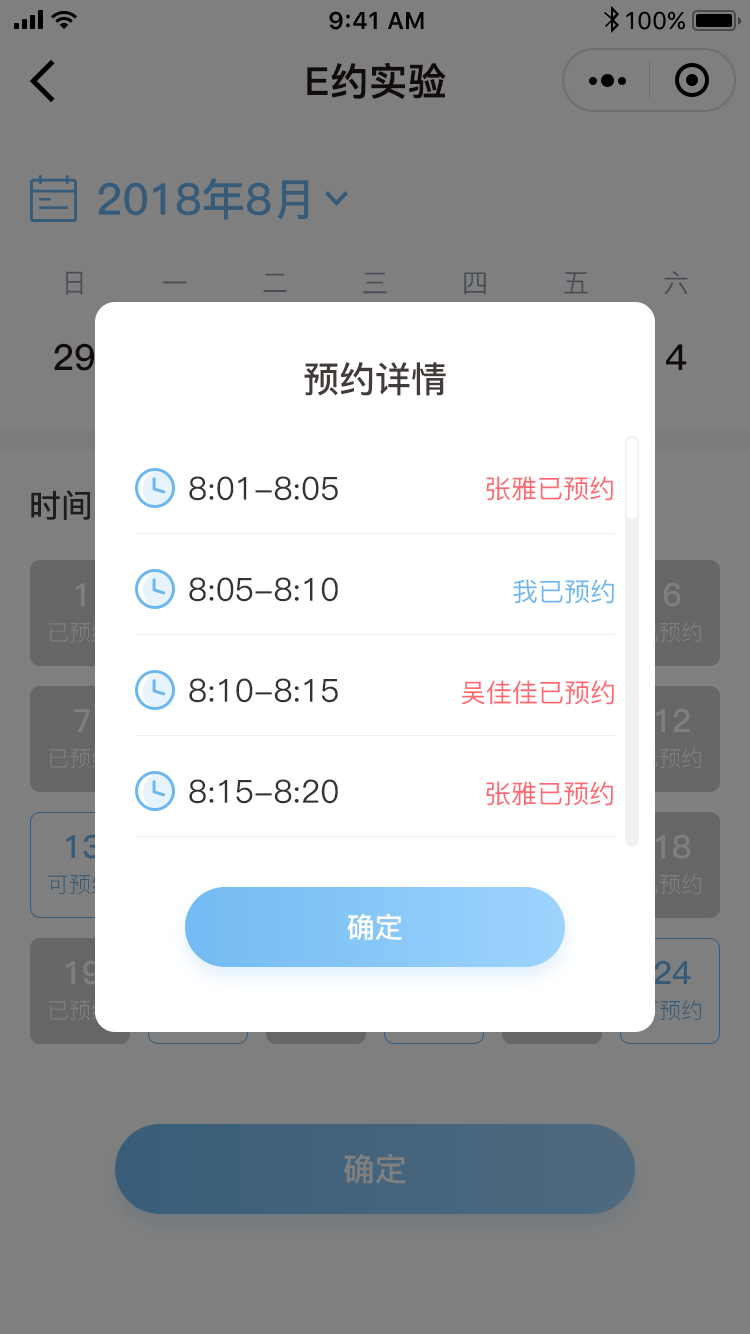
<style>
.page{position:relative;width:750px;height:1334px;background:#7f7f7f}
.page>*{position:absolute;margin:0}
.t1{font:38px "PingFang-SC-Bold";color:#231815;font-weight:bold}
.t2{font:44px "PingFang-SC-Bold";color:#365b78}
.t3{font:26px "PingFang-SC-Medium";color:#484e57}
.t4{font:36px "PingFang-SC-Bold";color:#231815}
.t5{font:36px "PingFang-SC-Bold";color:#433b39}
.t6{font:32px "PingFang-SC-Medium";color:#333333}
.t7{font:26px "PingFang-SC-Medium";color:#ff686f}
.t8{font:28px "PingFang-SC-Regular"}
.t9{font:32px "PingFang-SC-Bold"}
.t10{font:26px "PingFang-SC-Medium";color:#6cb7f1}
.t11{font:32px "PingFang-SC-Bold";color:#7f7f7f}
.t12{font:28.4px "PingFang-SC-Bold";color:#ffffff}
.t13{font:32px "PingFang-SC-Bold";color:#365b78}
</style>
<div class="page">
<p class="t1" style="left:307px;top:62px;width:139px;height:38px">E约实验</p>
<p class="t2" style="left:98px;top:178px;width:211px;height:42px">2018年8月</p>
<p class="t3" style="left:66px;top:271px;width:17px;height:24px">日</p>
<p class="t3" style="left:163px;top:281px;width:24px;height:3px">一</p>
<p class="t3" style="left:263px;top:273px;width:24px;height:19px">二</p>
<p class="t3" style="left:363px;top:272px;width:24px;height:22px">三</p>
<p class="t3" style="left:464px;top:272px;width:22px;height:23px">四</p>
<p class="t3" style="left:564px;top:272px;width:24px;height:22px">五</p>
<p class="t3" style="left:664px;top:271px;width:24px;height:24px">六</p>
<p class="t4" style="left:54px;top:343px;width:40px;height:28px">29</p>
<p class="t4" style="left:666px;top:344px;width:21px;height:26px">4</p>
<p class="t5" style="left:304px;top:362px;width:142px;height:34px">预约详情</p>
<p class="t6" style="left:189px;top:476px;width:149px;height:25px">8:01-8:05</p>
<p class="t7" style="left:486px;top:476px;width:127px;height:25px">张雅已预约</p>
<p class="t8" style="left:31px;top:490px;width:210px;height:30px"><span class="t9">时间</span>（单位：时）</p>
<p class="t6" style="left:189px;top:577px;width:149px;height:25px">8:05-8:10</p>
<p class="t10" style="left:513px;top:579px;width:101px;height:25px">我已预约</p>
<p class="t11" style="left:664px;top:582px;width:17px;height:25px">6</p>
<p class="t11" style="left:75px;top:583px;width:10px;height:23px">1</p>
<p class="t6" style="left:189px;top:678px;width:149px;height:25px">8:10-8:15</p>
<p class="t7" style="left:461px;top:680px;width:153px;height:25px">吴佳佳已预约</p>
<p class="t11" style="left:74px;top:709px;width:16px;height:23px">7</p>
<p class="t11" style="left:656px;top:708px;width:34px;height:24px">12</p>
<p class="t6" style="left:189px;top:779px;width:149px;height:25px">8:15-8:20</p>
<p class="t7" style="left:486px;top:781px;width:127px;height:25px">张雅已预约</p>
<p class="t11" style="left:656px;top:834px;width:34px;height:25px">18</p>
<p class="t12" style="left:347px;top:913px;width:55px;height:27px">确定</p>
<p class="t11" style="left:66px;top:960px;width:34px;height:25px">19</p>
<p class="t13" style="left:654px;top:960px;width:37px;height:24px">24</p>
<p class="t11" style="left:343px;top:1154px;width:63px;height:30px">确定</p>
</div>
